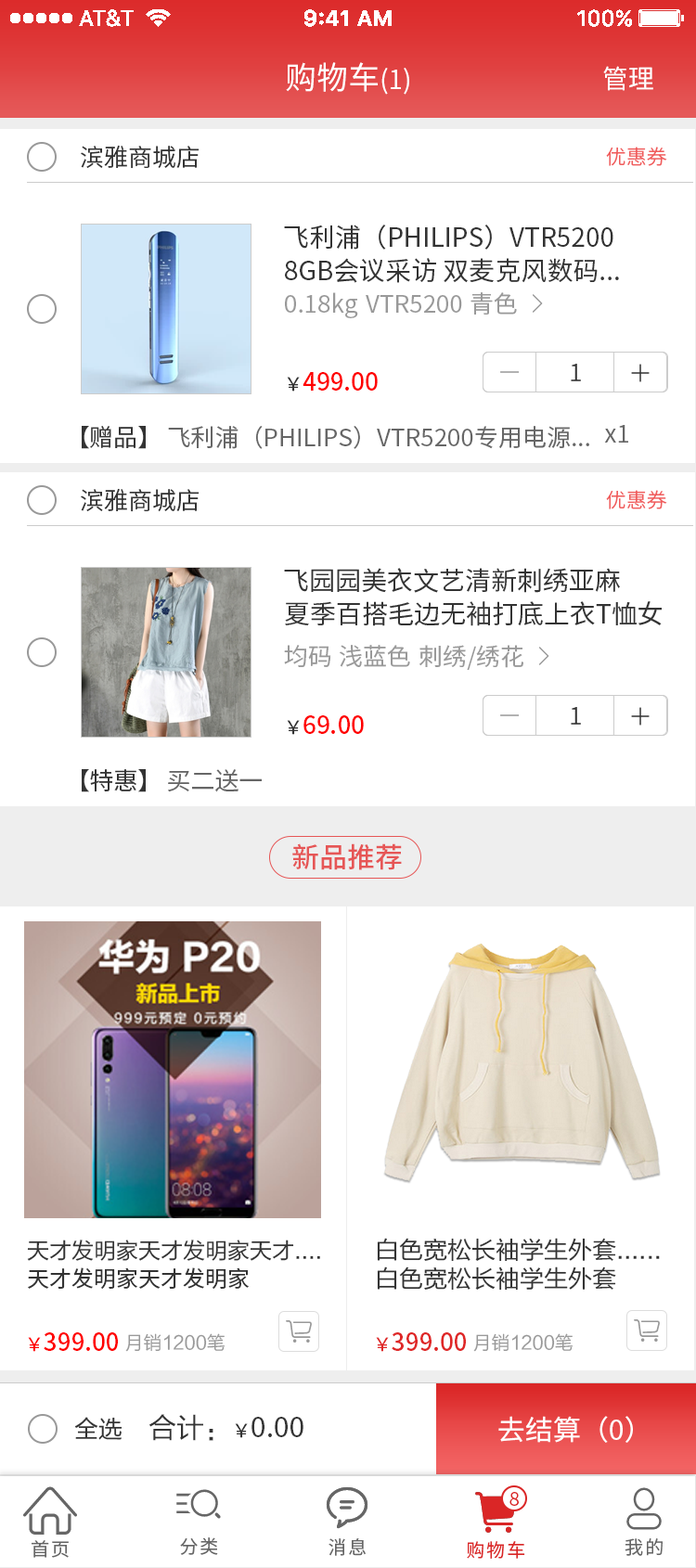
<style>
.page{position:relative;width:696px;height:1568px;background:#ffffff}
.page>*{position:absolute;margin:0}
.t1{font:31.5px "SourceHanSansCN-Regular";color:#ffffff}
.t2{font:26px "SourceHanSansCN-Regular";color:#ffffff}
.t3{font:24.1px "SourceHanSansCN-Normal";color:#333333}
.t4{font:20.4px "SourceHanSansCN-Normal";color:#f05c5c}
.t5{font:26px "SourceHanSansCN-Regular";color:#333333}
.t6{font:24.1px "SourceHanSansCN-Regular";color:#999999}
.t7{font:24.1px "SourceHanSansCN-Medium";color:#ff0000}
.t8{font:18.6px "SourceHanSansCN-Regular";color:#333333}
.t9{font:24.1px "SourceHanSansCN-Regular";color:#333333}
.t10{font:24.1px "SourceHanSansCN-Regular";color:#666666}
.t11{font:27.8px "SourceHanSansCN-Medium";color:#e65656}
.t12{font:22.3px "FZLTHK--GBK1-0";color:#333333}
.t13{font:24.1px "FZLTHK--GBK1-0";color:#333333}
.t14{font:22.3px "SourceHanSansCN-Regular";color:#333333}
.t15{font:18.6px "SourceHanSansCN-Regular";color:#ff0000}
.t16{font:18.6px "FZLTHK--GBK1-0";color:#999999}
.t17{font:24.1px "SourceHanSansCN-Medium";color:#df2727}
.t18{font:18.6px "SourceHanSansCN-Regular";color:#df2727}
.t19{font:27.8px "SourceHanSansCN-Regular";color:#333333}
.t20{font:27.8px "FZLTHK--GBK1-0";color:#333333}
.t21{font:27.8px "SourceHanSansCN-Regular";color:#ffffff}
.t22{font:18.6px "SourceHanSansCN-Normal";color:#da2626}
.t23{font:18.6px "SourceHanSansCN-Regular";letter-spacing:0.1em;color:#666666}
.t24{font:18.6px "SourceHanSansCN-Regular";letter-spacing:0.1em;color:#da2626}
</style>
<div class="page">
<p class="t1" style="left:286px;top:62px;width:123px;height:33px">购物车<span class="t2">(1)</span></p>
<p class="t2" style="left:603px;top:66px;width:50px;height:25px">管理</p>
<p class="t3" style="left:81px;top:145px;width:118px;height:24px">滨雅商城店</p>
<p class="t4" style="left:606px;top:147px;width:61px;height:19px">优惠券</p>
<p class="t5" style="left:284px;top:225px;width:329px;height:25px">飞利浦（PHILIPS）VTR5200</p>
<p class="t5" style="left:285px;top:258px;width:334px;height:25px">8GB会议采访 双麦克风数码...</p>
<p class="t6" style="left:285px;top:292px;width:73px;height:26px">0.18kg</p>
<p class="t6" style="left:470px;top:292px;width:47px;height:23px">青色</p>
<p class="t6" style="left:366px;top:295px;width:96px;height:18px">VTR5200</p>
<p class="t3" style="left:571px;top:364px;width:10px;height:17px">1</p>
<p class="t7" style="left:287px;top:372px;width:91px;height:20px"><span class="t8">￥</span>499.00</p>
<p class="t9" style="left:82px;top:426px;width:64px;height:23px">【赠品】</p>
<p class="t10" style="left:168px;top:426px;width:421px;height:23px">飞利浦（PHILIPS）VTR5200专用电源...</p>
<p class="t10" style="left:604px;top:425px;width:24px;height:18px">x1</p>
<p class="t3" style="left:81px;top:488px;width:118px;height:24px">滨雅商城店</p>
<p class="t4" style="left:606px;top:490px;width:61px;height:19px">优惠券</p>
<p class="t5" style="left:284px;top:568px;width:336px;height:25px">飞园园美衣文艺清新刺绣亚麻</p>
<p class="t5" style="left:285px;top:601px;width:377px;height:25px">夏季百搭毛边无袖打底上衣T恤女</p>
<p class="t6" style="left:284px;top:645px;width:47px;height:22px">均码</p>
<p class="t6" style="left:340px;top:645px;width:70px;height:22px">浅蓝色</p>
<p class="t6" style="left:419px;top:645px;width:104px;height:25px">刺绣/绣花</p>
<p class="t3" style="left:571px;top:707px;width:10px;height:18px">1</p>
<p class="t7" style="left:287px;top:715px;width:77px;height:20px"><span class="t8">￥</span>69.00</p>
<p class="t9" style="left:82px;top:769px;width:64px;height:23px">【特惠】</p>
<p class="t10" style="left:168px;top:769px;width:94px;height:23px">买二送一</p>
<p class="t11" style="left:292px;top:843px;width:110px;height:27px">新品推荐</p>
<p class="t12" style="left:27px;top:1240px;width:293px;height:21px">天才发明家天才发明家天才....</p>
<p class="t13" style="left:377px;top:1238px;width:283px;height:24px">白色宽松长袖学生外套......</p>
<p class="t14" style="left:28px;top:1267px;width:221px;height:22px">天才发明家天才发明家</p>
<p class="t13" style="left:377px;top:1266px;width:239px;height:25px">白色宽松长袖学生外套</p>
<p class="t7" style="left:28px;top:1332px;width:90px;height:20px"><span class="t15">¥</span>399.00</p>
<p class="t16" style="left:125px;top:1333px;width:100px;height:19px">月销1200笔</p>
<p class="t17" style="left:376px;top:1332px;width:90px;height:20px"><span class="t18">¥</span>399.00</p>
<p class="t16" style="left:473px;top:1333px;width:99px;height:19px">月销1200笔</p>
<p class="t13" style="left:74px;top:1417px;width:48px;height:23px">全选</p>
<p class="t19" style="left:149px;top:1414px;width:154px;height:27px"><span class="t20">合计：</span><span class="t8">¥</span>0.00</p>
<p class="t21" style="left:498px;top:1416px;width:135px;height:27px">去结算（0）</p>
<p class="t22" style="left:509px;top:1492px;width:10px;height:14px">8</p>
<p class="t23" style="left:32px;top:1540px;width:37px;height:18px">首页</p>
<p class="t23" style="left:180px;top:1537px;width:38px;height:18px">分类</p>
<p class="t23" style="left:328px;top:1538px;width:38px;height:18px">消息</p>
<p class="t24" style="left:467px;top:1541px;width:58px;height:18px">购物车</p>
<p class="t23" style="left:624px;top:1538px;width:38px;height:18px">我的</p>
</div>
